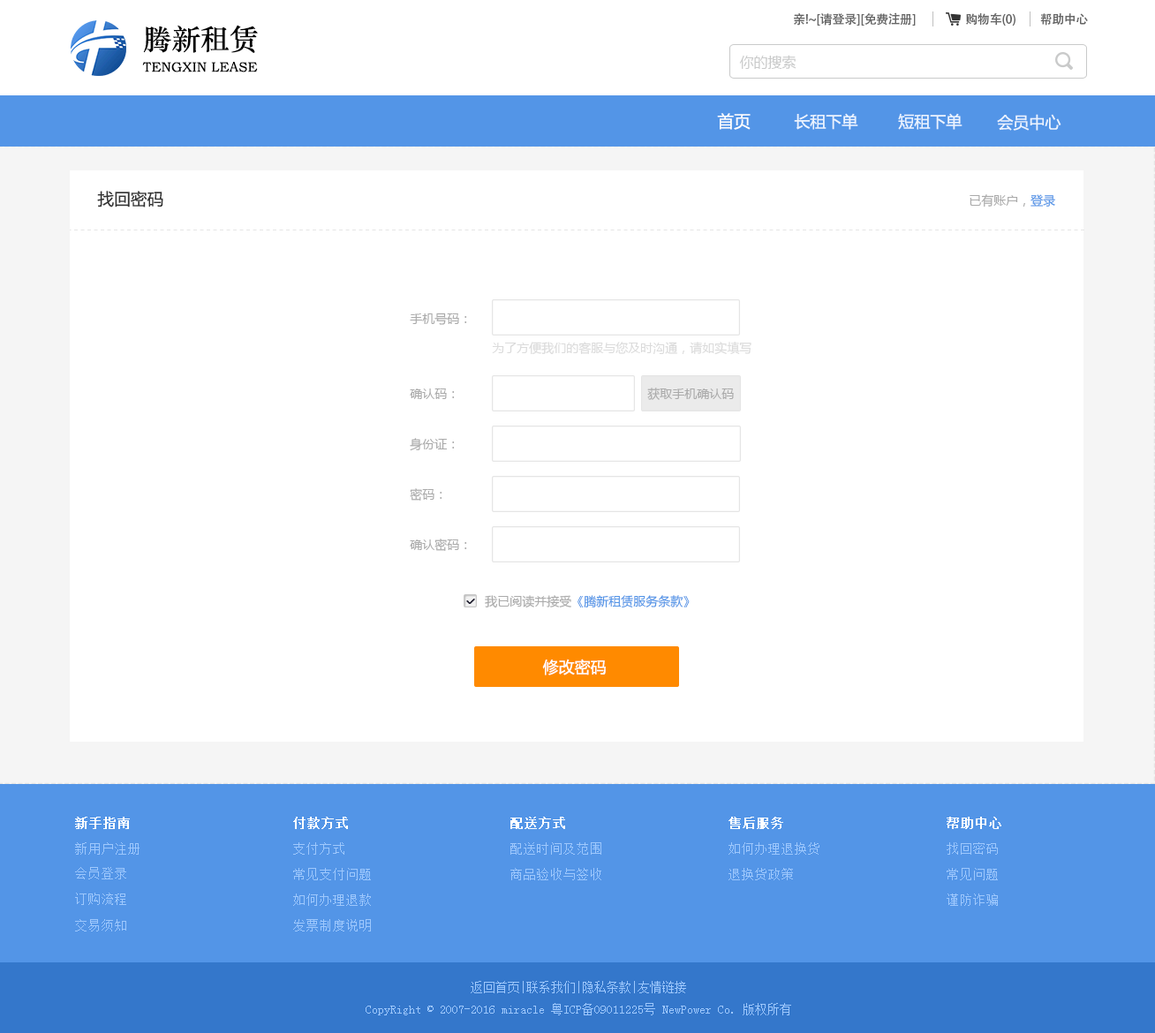
<style>
.page{position:relative;width:1155px;height:1033px;background:#ffffff}
.page>*{position:absolute;margin:0}
.t1{font:12.4px "AdobeHeitiStd-Regular";letter-spacing:-0.02em;color:#666666}
.t2{font:28.8px "STZhongsong";color:#000000}
.t3{font:13.7px "STZhongsong";color:#000000}
.t4{font:14.1px "MicrosoftYaHei";color:#c9caca}
.t5{font:16.6px "MicrosoftYaHei";color:#ffffff}
.t6{font:15.9px "MicrosoftYaHei";color:#eaf3ff}
.t7{font:16.6px "MicrosoftYaHei";color:#333333}
.t8{font:12.4px "MicrosoftYaHei";color:#aaaaaa}
.t9{font:12.4px "MicrosoftYaHei";color:#5395e7}
.t10{font:12.4px "MicrosoftYaHei";color:#dbdbdb}
.t11{font:15.9px "MicrosoftYaHei";color:#fffefe}
.t12{font:13.2px "SimSun";color:#ffffff;font-weight:bold}
.t13{font:13.2px "SimSun";color:#9ec8fd}
.t14{font:12.4px "SimSun";color:#9ec8fd}
</style>
<div class="page">
<p class="t1" style="left:794px;top:12px;width:121px;height:14px">亲!~[请登录][免费注册]</p>
<p class="t1" style="left:966px;top:12px;width:49px;height:14px">购物车(0)</p>
<p class="t1" style="left:1040px;top:13px;width:48px;height:13px">帮助中心</p>
<p class="t2" style="left:143px;top:25px;width:115px;height:28px">腾新租赁</p>
<p class="t3" style="left:142px;top:62px;width:116px;height:10px">TENGXIN LEASE</p>
<p class="t4" style="left:739px;top:55px;width:57px;height:14px">你的搜索</p>
<p class="t5" style="left:717px;top:113px;width:33px;height:17px">首页</p>
<p class="t6" style="left:794px;top:113px;width:64px;height:17px">长租下单</p>
<p class="t6" style="left:898px;top:113px;width:64px;height:17px">短租下单</p>
<p class="t6" style="left:997px;top:114px;width:64px;height:17px">会员中心</p>
<p class="t7" style="left:97px;top:191px;width:66px;height:16px">找回密码</p>
<p class="t8" style="left:969px;top:194px;width:86px;height:13px">已有账户，<span class="t9">登录</span></p>
<p class="t8" style="left:410px;top:312px;width:57px;height:13px">手机号码：</p>
<p class="t10" style="left:492px;top:342px;width:259px;height:13px">为了方便我们的客服与您及时沟通，请如实填写</p>
<p class="t8" style="left:410px;top:388px;width:45px;height:11px">确认码：</p>
<p class="t8" style="left:647px;top:388px;width:87px;height:12px">获取手机确认码</p>
<p class="t8" style="left:410px;top:438px;width:45px;height:13px">身份证：</p>
<p class="t8" style="left:410px;top:488px;width:32px;height:12px">密码：</p>
<p class="t8" style="left:410px;top:538px;width:57px;height:13px">确认密码：</p>
<p class="t9" style="left:485px;top:595px;width:204px;height:13px"><span class="t8">我已阅读并接受</span>《腾新租赁服务条款》</p>
<p class="t11" style="left:542px;top:659px;width:64px;height:16px">修改密码</p>
<p class="t12" style="left:75px;top:817px;width:55px;height:12px">新手指南</p>
<p class="t12" style="left:293px;top:817px;width:55px;height:12px">付款方式</p>
<p class="t12" style="left:510px;top:817px;width:55px;height:12px">配送方式</p>
<p class="t12" style="left:728px;top:817px;width:55px;height:12px">售后服务</p>
<p class="t12" style="left:946px;top:817px;width:55px;height:12px">帮助中心</p>
<p class="t13" style="left:75px;top:842px;width:64px;height:12px">新用户注册</p>
<p class="t13" style="left:293px;top:842px;width:51px;height:12px">支付方式</p>
<p class="t13" style="left:510px;top:842px;width:91px;height:12px">配送时间及范围</p>
<p class="t13" style="left:728px;top:842px;width:91px;height:12px">如何办理退换货</p>
<p class="t13" style="left:946px;top:842px;width:51px;height:12px">找回密码</p>
<p class="t13" style="left:75px;top:867px;width:51px;height:12px">会员登录</p>
<p class="t13" style="left:293px;top:868px;width:78px;height:12px">常见支付问题</p>
<p class="t13" style="left:510px;top:868px;width:91px;height:12px">商品验收与签收</p>
<p class="t13" style="left:728px;top:868px;width:65px;height:12px">退换货政策</p>
<p class="t13" style="left:946px;top:868px;width:51px;height:12px">常见问题</p>
<p class="t13" style="left:75px;top:892px;width:51px;height:13px">订购流程</p>
<p class="t13" style="left:293px;top:893px;width:78px;height:13px">如何办理退款</p>
<p class="t13" style="left:946px;top:893px;width:51px;height:13px">谨防诈骗</p>
<p class="t13" style="left:75px;top:919px;width:51px;height:12px">交易须知</p>
<p class="t13" style="left:293px;top:919px;width:78px;height:12px">发票制度说明</p>
<p class="t14" style="left:365px;top:981px;width:426px;height:34px;text-align:center">返回首页|联系我们|隐私条款|友情链接<br>CopyRight © 2007-2016 miracle 粤ICP备09011225号 NewPower Co. 版权所有</p>
</div>
